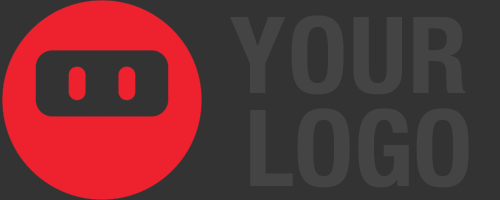
<style>
.page{position:relative;width:500px;height:200px;background:#333333}
.page>*{position:absolute;margin:0}
.t1{font:106.4px/93px "HelveticaNeue-CondensedBold";letter-spacing:0.02em;color:#444444;text-transform:uppercase}
.t2{font:106.4px/93px "HelveticaNeue-CondensedBold";color:#444444;text-transform:uppercase}
</style>
<div class="page">
<p class="t1" style="left:230px;top:15px;width:239px;height:173px">YOUR<br> <span class="t2">LOGO</span></p>
</div>
